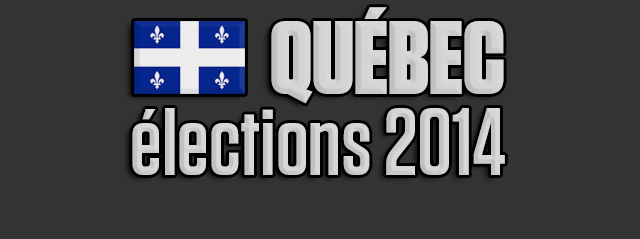
<style>
.page{position:relative;width:640px;height:239px;background:#333333}
.page>*{position:absolute;margin:0}
.t1{font:94px/81.6px "Tungsten-Semibold";color:#d4d4d4}
.t2{font:103.5px/102.6px "Tungsten-Black";color:#d4d4d4}
</style>
<div class="page">
<p class="t1" style="left:132px;top:7px;width:373px;height:168px;text-align:right"><span class="t2">QUÉBEC<br></span>élections 2014</p>
</div>
